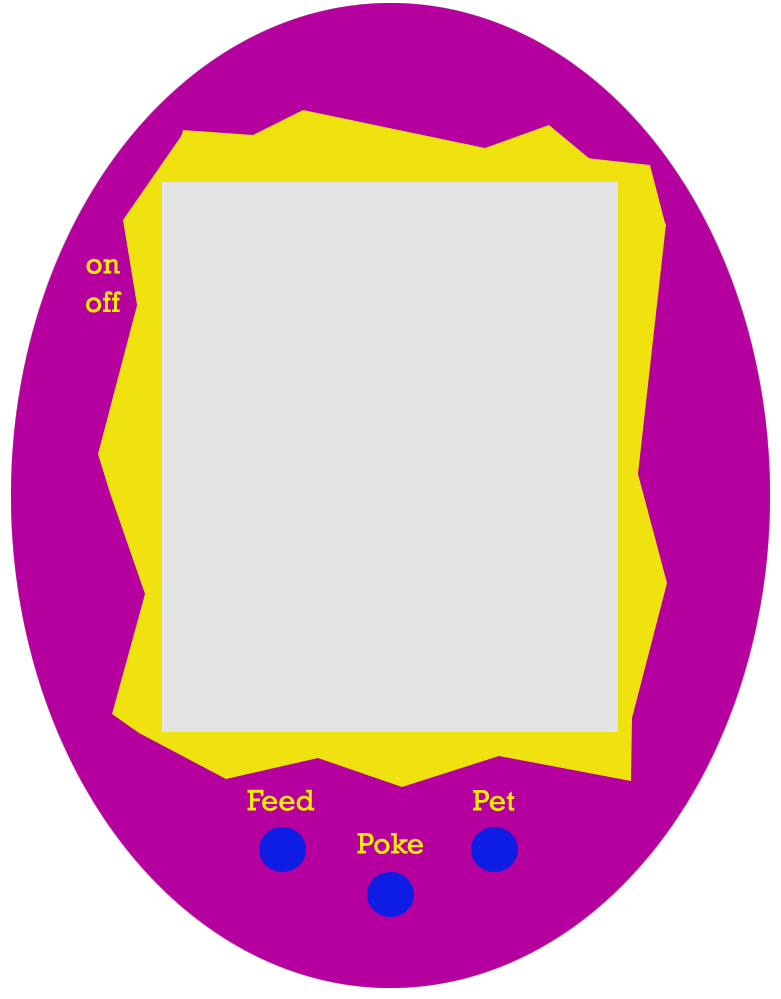
<style>
.page{position:relative;width:781px;height:999px;background:#e4e4e4}
.page>*{position:absolute;margin:0}
.t1{font:30px "Rockwell";color:#ffea00}
</style>
<div class="page">
<p class="t1" style="left:86px;top:258px;width:34px;height:16px">on</p>
<p class="t1" style="left:86px;top:291px;width:36px;height:22px">off</p>
<p class="t1" style="left:247px;top:789px;width:68px;height:22px">Feed</p>
<p class="t1" style="left:473px;top:790px;width:42px;height:21px">Pet</p>
<p class="t1" style="left:357px;top:833px;width:66px;height:21px">Poke</p>
</div>
